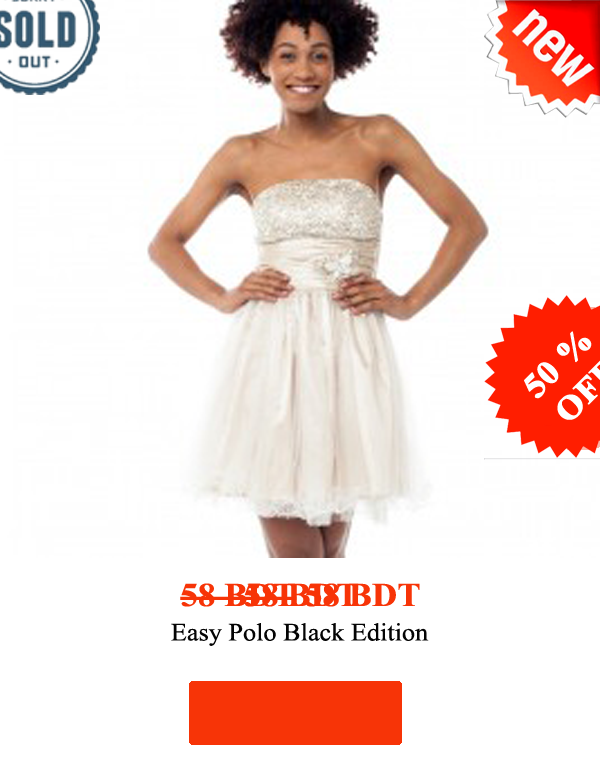
<style>
.page{position:relative;width:600px;height:780px;background:#ffffff}
.page>*{position:absolute;margin:0}
.t1{font:33.3px "TimesNewRomanPS-BoldMT";color:#f73407;scale:1.05 1}
.t2{font:25px "TimesNewRomanPSMT";color:#040404;scale:1.05 1}
</style>
<div class="page">
<p class="t1" style="left:180px;top:583px;width:240px;height:24px">58 BDT 58 BDT</p>
<p class="t1" style="left:244px;top:583px;width:115px;height:24px">58 BDT</p>
<p class="t2" style="left:171px;top:623px;width:258px;height:23px">Easy Polo Black Edition</p>
</div>
